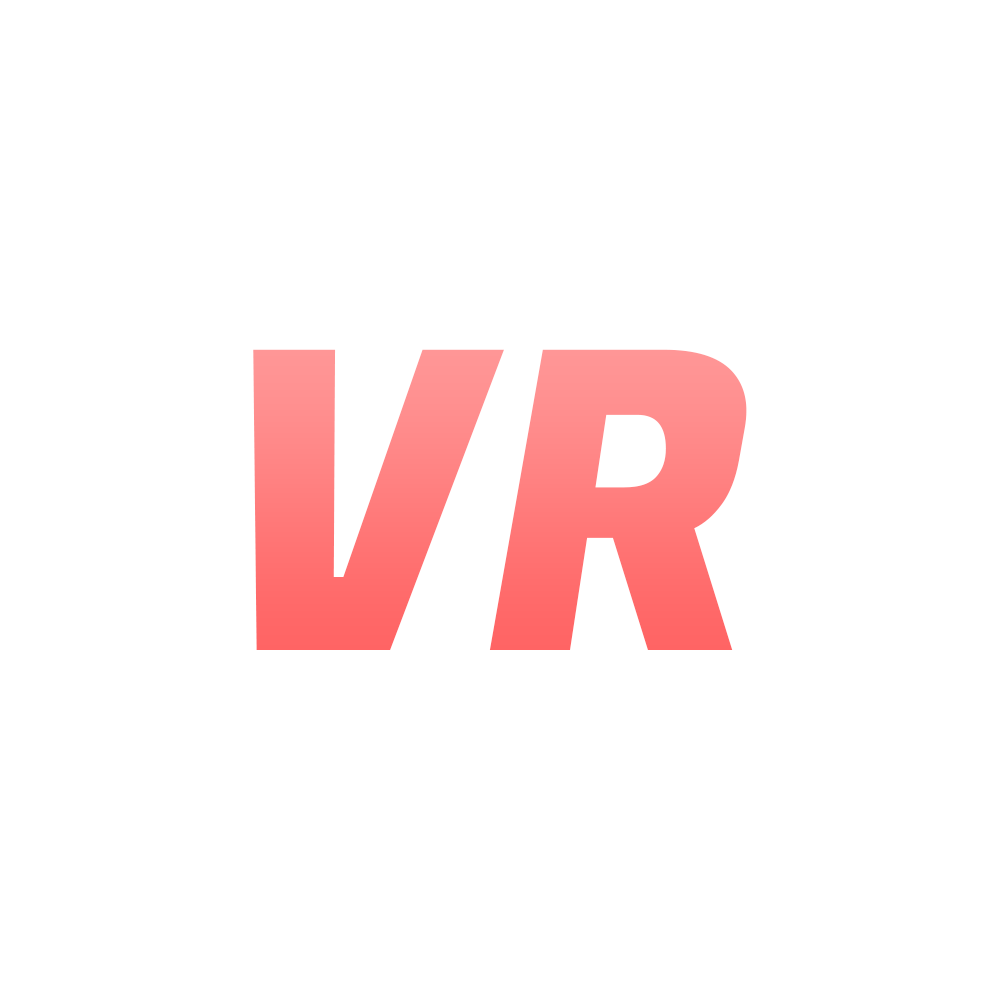
<style>
.page{position:relative;width:1000px;height:1000px;background:#ffffff}
.page>*{position:absolute;margin:0}
.t1{font:416.7px "FugazOne-Regular";color:#ff7e7e}
</style>
<div class="page">
<p class="t1" style="left:253px;top:349px;width:494px;height:301px">VR</p>
</div>
